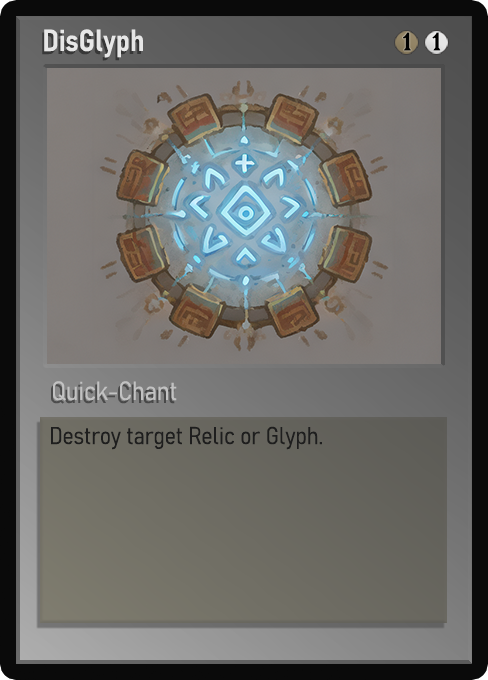
<style>
.page{position:relative;width:488px;height:680px}
.page>*{position:absolute;margin:0}
.t1{font:30px "Bahnschrift-SemiBoldSemiCondensed";color:#f2f2f2;font-weight:bold}
.t2{font:25px "WTRRoycroft";color:#000000;font-weight:bold;scale:1.09 1}
.t3{font:26px "Bahnschrift-LightSemiCondensed";color:#c8c8c8;font-weight:bold}
.t4{font:24px "Bahnschrift-LightSemiCondensed";color:#1e1e1e;font-weight:bold}
</style>
<div class="page">
<p class="t1" style="left:44px;top:29px;width:99px;height:29px;opacity:0.9">DisGlyph</p>
<p class="t2" style="left:403px;top:32px;width:8px;height:19px">1</p>
<p class="t2" style="left:432px;top:32px;width:9px;height:19px">1</p>
<p class="t3" style="left:53px;top:381px;width:124px;height:20px;opacity:0.9">Quick-Chant</p>
<p class="t4" style="left:51px;top:426px;width:271px;height:24px">Destroy target Relic or Glyph.</p>
</div>
